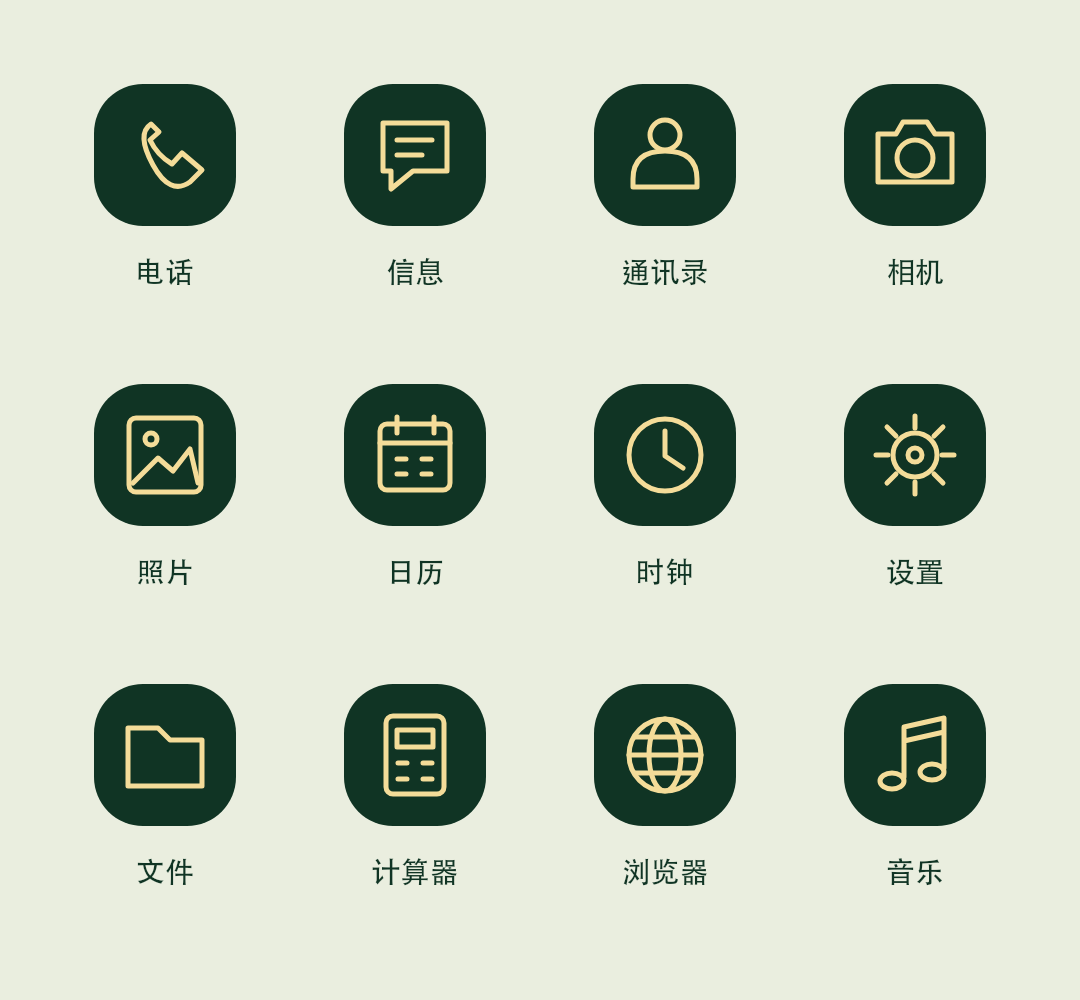
<style>
.page{position:relative;width:1080px;height:1000px;background:#eaeedf}
.page>*{position:absolute;margin:0}
.t1{font:29px "STHeitiTC-Medium";color:#103424}
</style>
<div class="page">
<p class="t1" style="left:387px;top:257px;width:56px;height:29px">信息</p>
<p class="t1" style="left:138px;top:258px;width:55px;height:27px">电话</p>
<p class="t1" style="left:622px;top:258px;width:85px;height:28px">通讯录</p>
<p class="t1" style="left:888px;top:258px;width:56px;height:28px">相机</p>
<p class="t1" style="left:637px;top:558px;width:55px;height:27px">时钟</p>
<p class="t1" style="left:137px;top:559px;width:55px;height:26px">照片</p>
<p class="t1" style="left:391px;top:560px;width:52px;height:26px">日历</p>
<p class="t1" style="left:887px;top:559px;width:56px;height:27px">设置</p>
<p class="t1" style="left:137px;top:858px;width:56px;height:27px">文件</p>
<p class="t1" style="left:372px;top:858px;width:85px;height:28px">计算器</p>
<p class="t1" style="left:623px;top:858px;width:84px;height:28px">浏览器</p>
<p class="t1" style="left:887px;top:858px;width:55px;height:28px">音乐</p>
</div>
